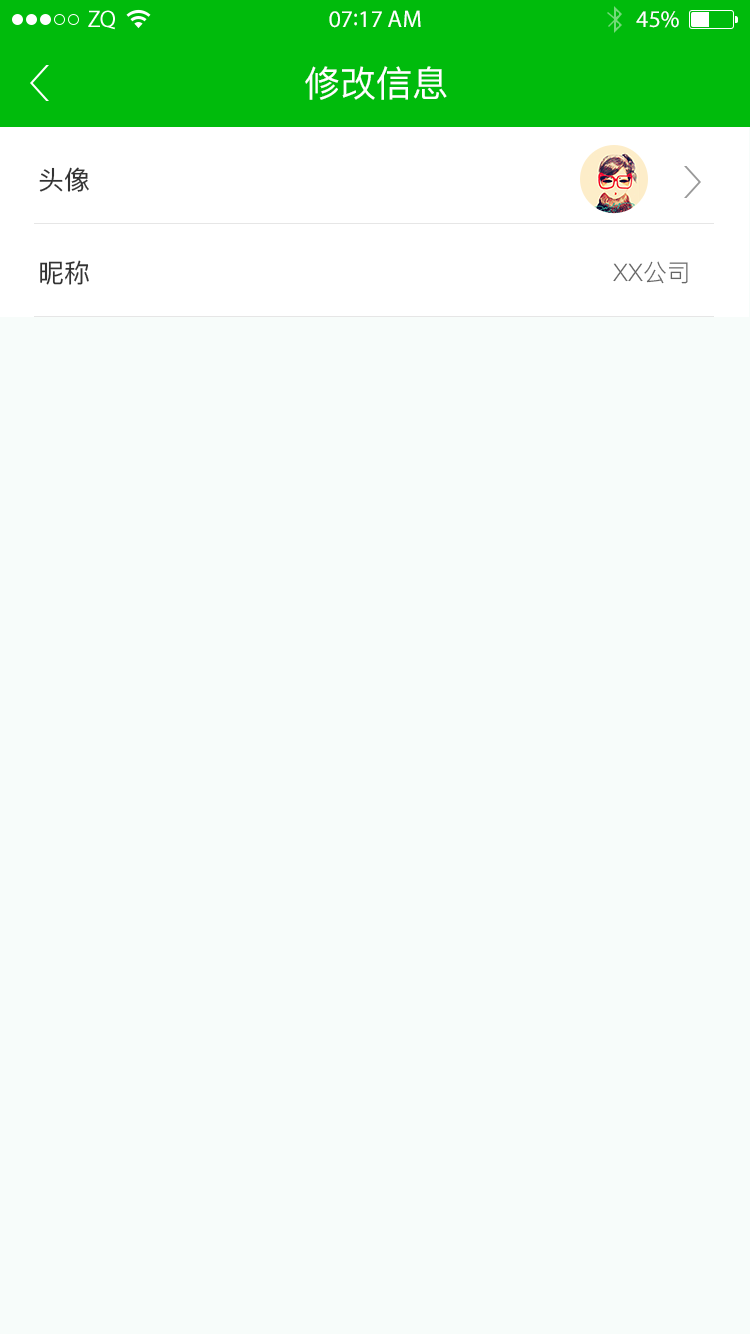
<style>
.page{position:relative;width:750px;height:1334px;background:#f7fcfa}
.page>*{position:absolute;margin:0}
.t1{font:24px "MyriadPro-Regular";color:#ffffff}
.t2{font:36px "PingFang-SC-Medium";color:#ffffff}
.t3{font:26px "PingFang-SC-Medium";color:#333333}
.t4{font:24px "PingFang-SC-Regular";color:#666666}
</style>
<div class="page">
<p class="t1" style="left:329px;top:10px;width:92px;height:18px">07:17 AM</p>
<p class="t1" style="left:636px;top:11px;width:43px;height:17px">45%</p>
<p class="t2" style="left:305px;top:66px;width:142px;height:34px">修改信息</p>
<p class="t3" style="left:39px;top:167px;width:50px;height:25px">头像</p>
<p class="t3" style="left:40px;top:260px;width:49px;height:25px">昵称</p>
<p class="t4" style="left:613px;top:261px;width:75px;height:23px">XX公司</p>
</div>
